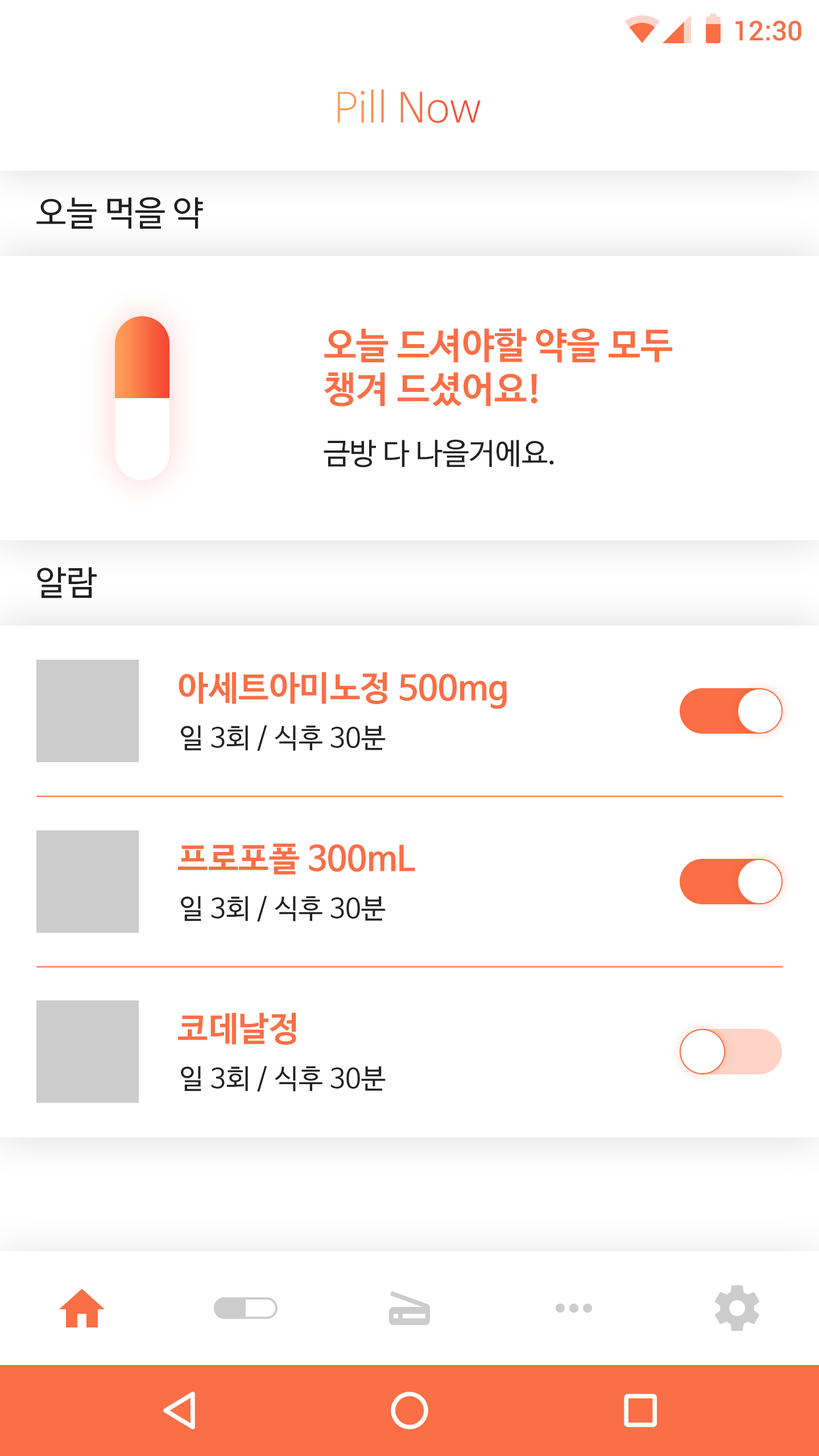
<style>
.page{position:relative;width:819px;height:1456px;background:#ffffff}
.page>*{position:absolute;margin:0}
.t1{font:27.3px "Roboto-Medium";color:#fa6f45}
.t2{font:40.9px "NanumBarunGothicLight"}
.t3{font:34.1px "NanumBarunGothic";color:#202020}
.t4{font:36.4px "NanumBarunGothicBold";color:#fa6f45}
.t5{font:29.6px "NanumBarunGothic";color:#222222}
.t6{font:34.1px "NanumBarunGothicBold";color:#fa6f45}
.t7{font:27.3px "NanumBarunGothic";color:#222222}
</style>
<div class="page">
<p class="t1" style="left:735px;top:20px;width:66px;height:21px">12:30</p>
<p class="t2" style="left:337px;top:89px;width:144px;height:34px">Pill Now</p>
<p class="t3" style="left:36px;top:197px;width:167px;height:32px">오늘 먹을 약</p>
<p class="t4" style="left:324px;top:328px;width:348px;height:79px">오늘 드셔야할 약을 모두<br>챙겨 드셨어요!</p>
<p class="t5" style="left:324px;top:440px;width:230px;height:28px">금방 다 나을거에요.</p>
<p class="t3" style="left:37px;top:567px;width:60px;height:31px">알람</p>
<p class="t6" style="left:179px;top:672px;width:328px;height:37px">아세트아미노정 500mg</p>
<p class="t7" style="left:181px;top:725px;width:205px;height:26px">일 3회 / 식후 30분</p>
<p class="t6" style="left:178px;top:843px;width:237px;height:32px">프로포폴 300mL</p>
<p class="t7" style="left:181px;top:896px;width:205px;height:26px">일 3회 / 식후 30분</p>
<p class="t6" style="left:178px;top:1012px;width:118px;height:33px">코데날정</p>
<p class="t7" style="left:181px;top:1066px;width:205px;height:26px">일 3회 / 식후 30분</p>
</div>
